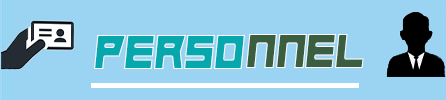
<style>
.page{position:relative;width:446px;height:100px;background:#9bd4f2}
.page>*{position:absolute;margin:0}
.t1{font:50px "Hindsight2020";color:#06a7ad;scale:0.94 1}
.t2{font:50px "Hindsight2020";color:#3b5e41;scale:0.94 1}
</style>
<div class="page">
<p class="t1" style="left:94px;top:35px;width:151px;height:34px">perso</p>
<p class="t2" style="left:246px;top:34px;width:118px;height:34px">nnel</p>
</div>
